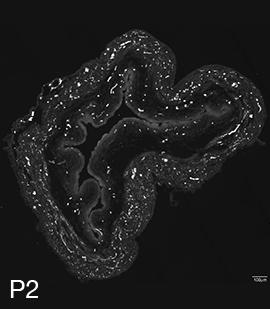
<style>
.page{position:relative;width:270px;height:309px;background:#131313}
.page>*{position:absolute;margin:0}
.t1{font:25.4px "HelveticaNeue";color:#ffffff}
</style>
<div class="page">
<p class="t1" style="left:10px;top:280px;width:29px;height:18px">P2</p>
</div>
